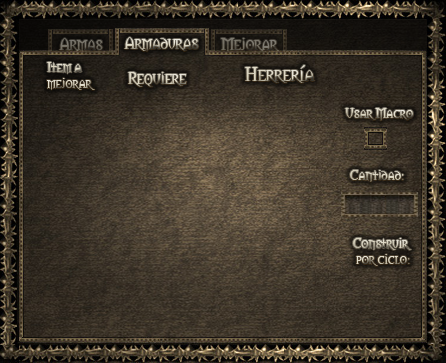
<style>
.page{position:relative;width:446px;height:363px}
.page>*{position:absolute;margin:0}
.t1{font:16px "Morpheus"}
.t2{font:13.3px "Morpheus"}
.t3{font:18.7px "Morpheus"}
.t4{font:13.3px "Morpheus";color:#d9d3bf}
.t5{font:13.3px "Morpheus";color:#dcd7c4}
</style>
<div class="page">
<p class="t1" style="left:124px;top:37px;width:75px;height:15px">Armaduras</p>
<p class="t2" style="left:47px;top:62px;width:48px;height:28px">Item a mejorar</p>
<p class="t3" style="left:245px;top:65px;width:70px;height:18px">Herrería</p>
<p class="t1" style="left:128px;top:72px;width:59px;height:15px">Requiere</p>
<p class="t2" style="left:345px;top:108px;width:68px;height:13px">Usar Macro</p>
<p class="t4" style="left:350px;top:170px;width:54px;height:12px">Cantidad:</p>
<p class="t5" style="left:353px;top:238px;width:59px;height:28px">Construir<br> por ciclo:</p>
</div>
